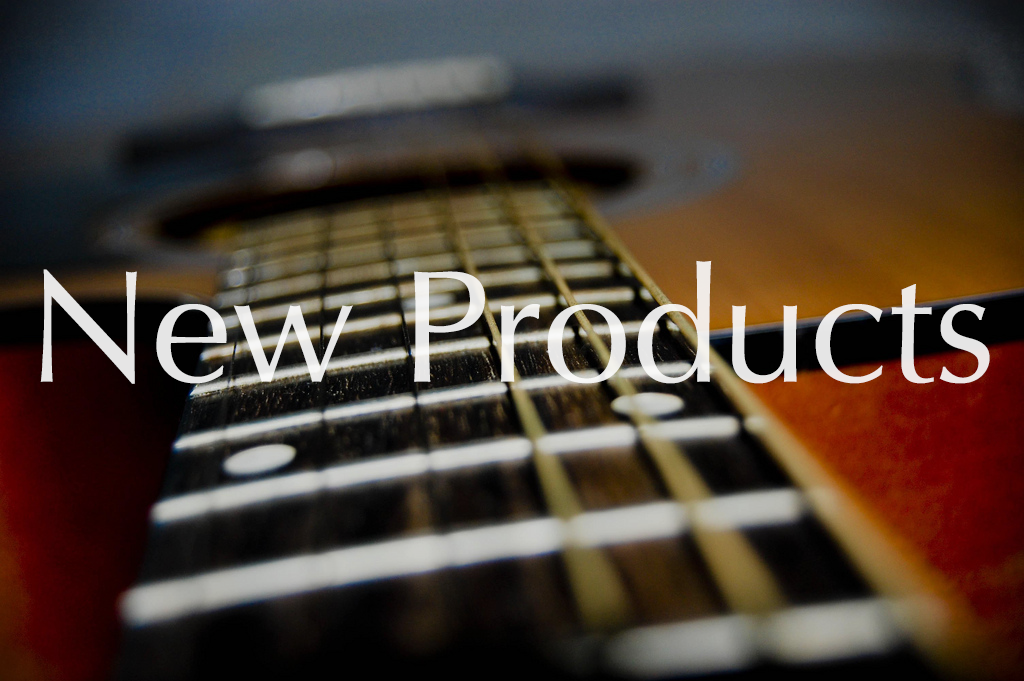
<style>
.page{position:relative;width:1024px;height:681px}
.page>*{position:absolute;margin:0}
.t1{font:160px "Optima-Regular";color:#e7e6e6}
</style>
<div class="page">
<p class="t1" style="left:40px;top:260px;width:950px;height:124px">New Products</p>
</div>
